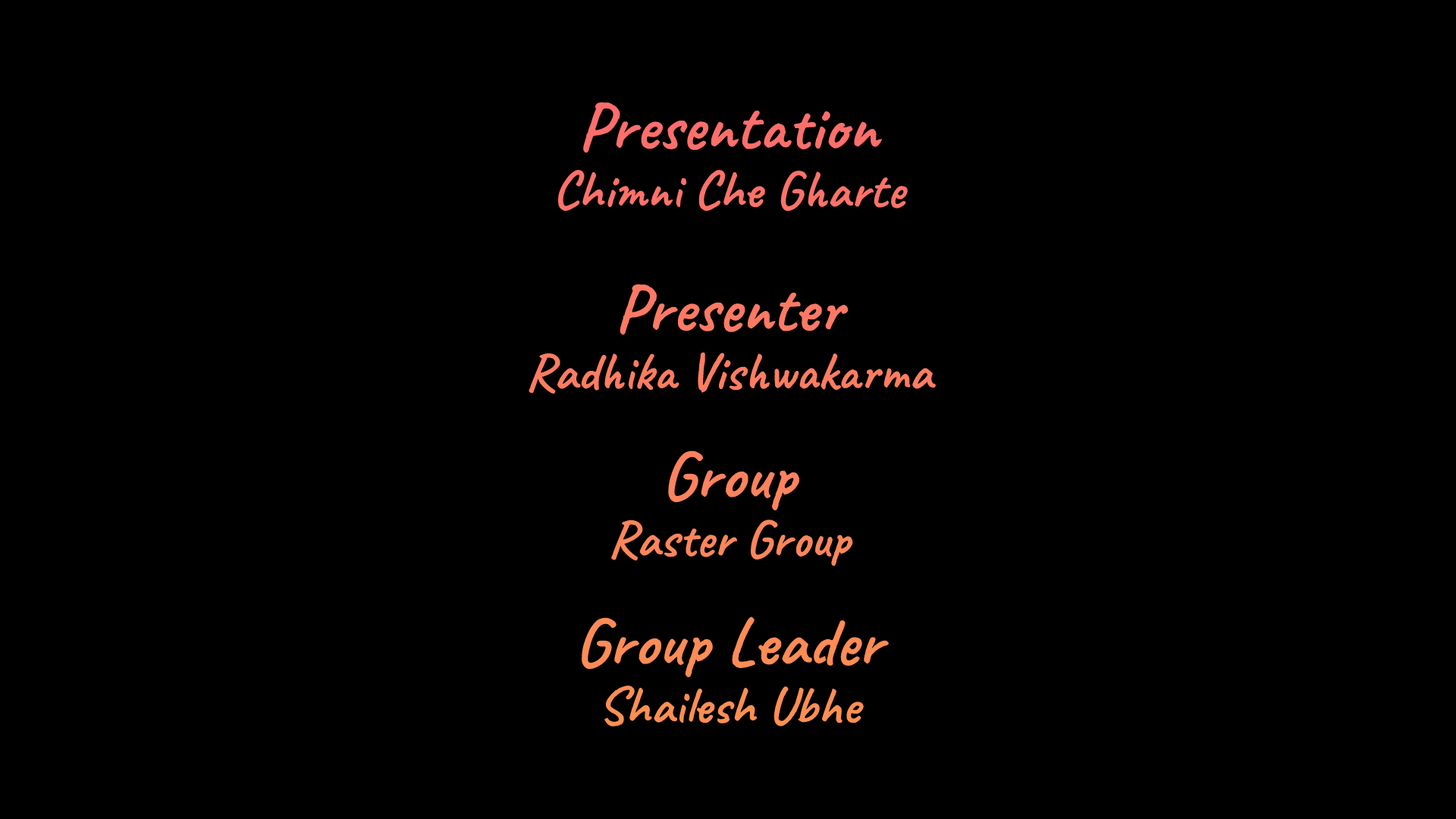
<style>
.page{position:relative;width:1456px;height:819px;background:#000000}
.page>*{position:absolute;margin:0}
.t1{font:68.2px "Caveat-Bold";color:#fd6f6b}
.t2{font:53.1px "Caveat-Bold";color:#fd7269}
.t3{font:68.2px "Caveat-Bold";color:#fd7964}
.t4{font:53.1px "Caveat-Bold";color:#fe7d61}
.t5{font:68.2px "Caveat-Bold";color:#fd825e}
.t6{font:53.1px "Caveat-Bold";color:#fd865b}
.t7{font:68.2px "Caveat-Bold";color:#fe8c55}
.t8{font:53.1px "Caveat-Bold";color:#fe8f52}
</style>
<div class="page">
<p class="t1" style="left:583px;top:102px;width:299px;height:51px">Presentation</p>
<p class="t2" style="left:558px;top:170px;width:350px;height:42px">Chimni Che Gharte</p>
<p class="t3" style="left:620px;top:284px;width:229px;height:51px">Presenter</p>
<p class="t4" style="left:529px;top:352px;width:407px;height:42px">Radhika Vishwakarma</p>
<p class="t5" style="left:668px;top:450px;width:131px;height:60px">Group</p>
<p class="t6" style="left:611px;top:519px;width:242px;height:47px">Raster Group</p>
<p class="t7" style="left:582px;top:617px;width:308px;height:60px">Group Leader</p>
<p class="t8" style="left:604px;top:686px;width:260px;height:40px">Shailesh Ubhe</p>
</div>
